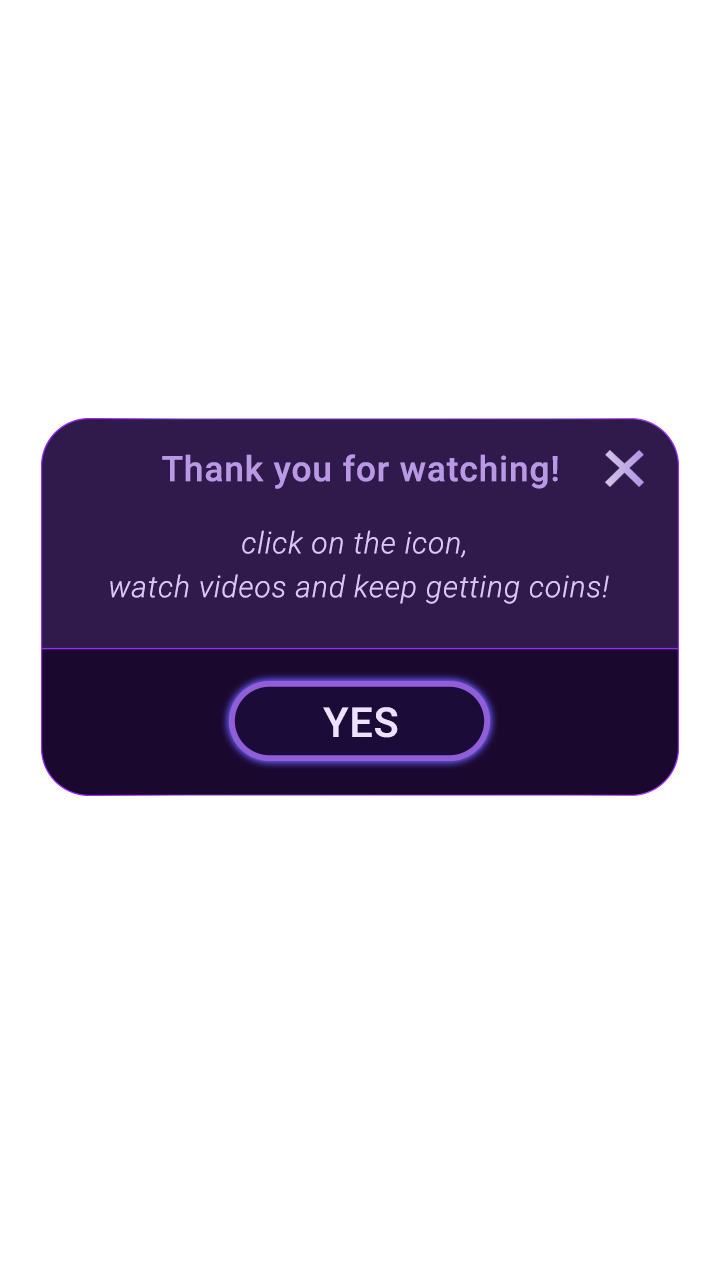
<style>
.page{position:relative;width:720px;height:1280px;background:#ffffff}
.page>*{position:absolute;margin:0}
.t1{font:35px "Roboto-Medium";letter-spacing:0.025em;color:#b999e6}
.t2{font:30px/14px "Roboto-LightItalic";letter-spacing:0.025em;color:#dbc6fa}
.t3{font:41px "Roboto-Medium";letter-spacing:0.025em;color:#eee1ff}
</style>
<div class="page">
<p class="t1" style="left:162px;top:454px;width:396px;height:35px">Thank you for watching!</p>
<p class="t2" style="left:110px;top:530px;width:499px;height:74px;text-align:center">click on the icon, <br>watch videos and keep getting coins!</p>
<p class="t3" style="left:323px;top:707px;width:75px;height:31px">YES</p>
</div>
